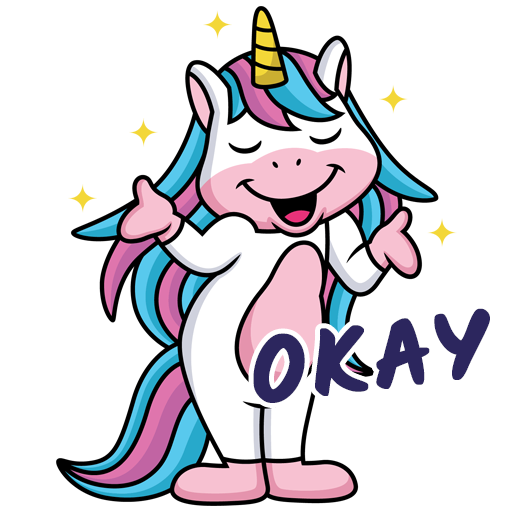
<style>
.page{position:relative;width:512px;height:512px;background:#ffffff}
.page>*{position:absolute;margin:0}
.t1{font:100px "Kalam-Bold";letter-spacing:0.025em;color:#2c265e;font-weight:bold}
</style>
<div class="page">
<p class="t1" style="left:253px;top:308px;width:237px;height:95px;rotate:-7deg">OKAY</p>
</div>
